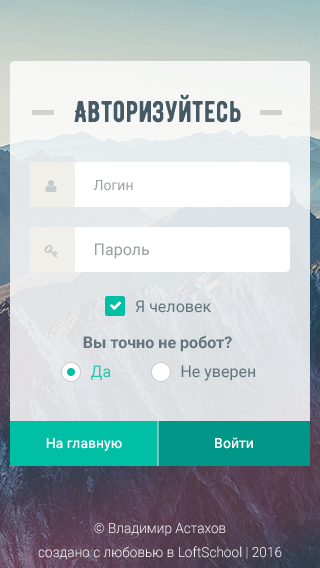
<style>
.page{position:relative;width:320px;height:568px}
.page>*{position:absolute;margin:0}
.t1{font:30px "BERNIERRegular-Regular";color:#455a64}
.t2{font:14px "Roboto-Regular";color:#9a9ea0}
.t3{font:16px "Roboto-Regular";color:#9a9ea0}
.t4{font:16px "Roboto-Regular";color:#63757e}
.t5{font:16px "Roboto-Bold";color:#63757d}
.t6{font:16px "Roboto-Regular";color:#2cc5b1}
.t7{font:16px "Roboto-Regular";color:#63747d}
.t8{font:14px "Roboto-Medium";color:#ffffff}
.t9{font:14.1px/24.1px "Roboto-Light";color:#ffffff;scale:0.97 1}
</style>
<div class="page">
<p class="t1" style="left:74px;top:94px;width:167px;height:29px">Авторизуйтесь</p>
<p class="t2" style="left:93px;top:180px;width:40px;height:11px">Логин</p>
<p class="t3" style="left:95px;top:243px;width:54px;height:16px">Пароль</p>
<p class="t4" style="left:135px;top:300px;width:76px;height:13px">Я человек</p>
<p class="t5" style="left:83px;top:335px;width:149px;height:17px">Вы точно не робот?</p>
<p class="t6" style="left:91px;top:365px;width:20px;height:15px">Да</p>
<p class="t7" style="left:181px;top:365px;width:74px;height:16px">Не уверен</p>
<p class="t8" style="left:46px;top:438px;width:76px;height:13px">На главную</p>
<p class="t8" style="left:215px;top:437px;width:38px;height:12px">Войти</p>
<p class="t9" style="left:38px;top:523px;width:244px;height:37px;text-align:center">© Владимир Астахов<br>создано с любовью в LoftSchool | 2016</p>
</div>
